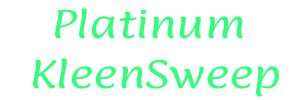
<style>
.page{position:relative;width:300px;height:100px;background:#ffffff}
.page>*{position:absolute;margin:0}
.t1{font:31.7px "Paprika-Regular";color:#31ff7a;scale:1.32 1}
</style>
<div class="page">
<p class="t1" style="left:33px;top:8px;width:246px;height:89px;text-align:center">Platinum<br> KleenSweep</p>
</div>
